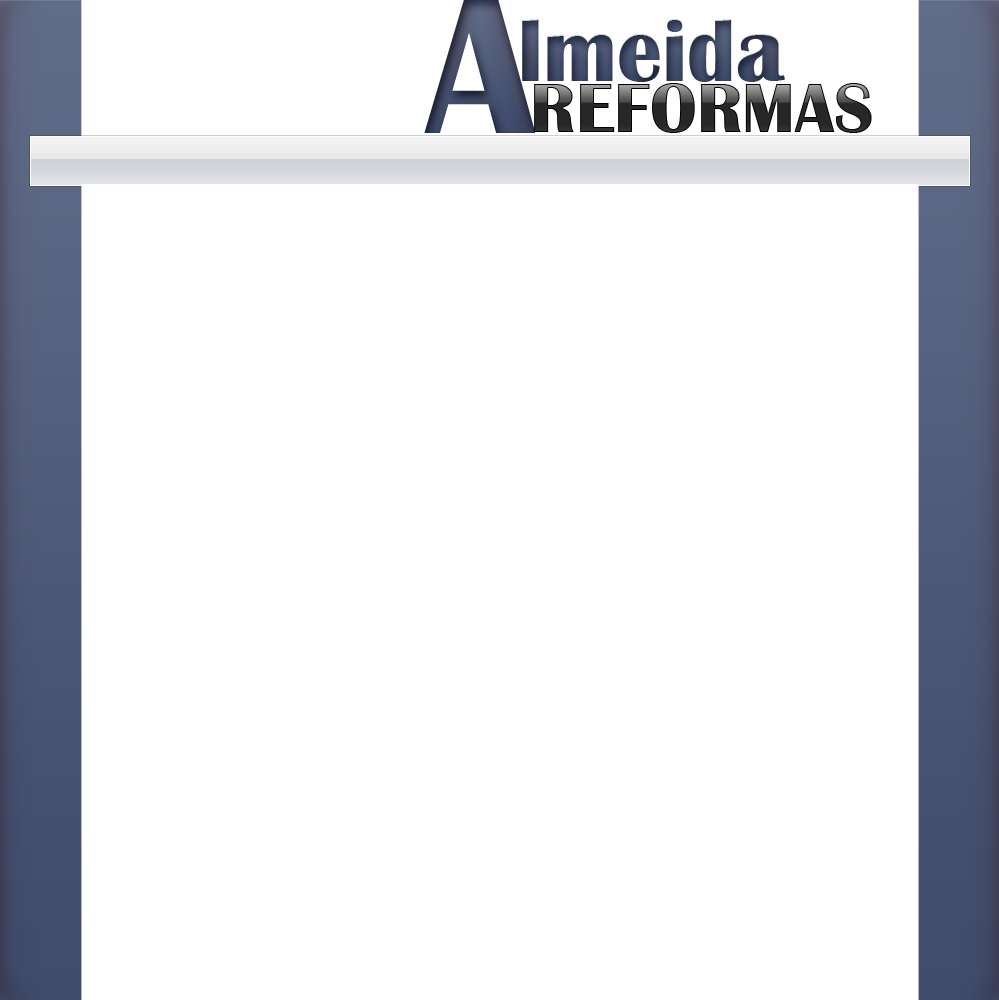
<style>
.page{position:relative;width:999px;height:1000px;background:#ffffff}
.page>*{position:absolute;margin:0}
.t1{font:200px "BritannicBold";color:#434c68}
.t2{font:90px "BritannicBold";color:#3c4661}
.t3{font:72px "BritannicBold"}
</style>
<div class="page">
<p class="t1" style="left:424px;top:0px;width:112px;height:133px">A</p>
<p class="t2" style="left:522px;top:20px;width:263px;height:62px">lmeida</p>
<p class="t3" style="left:534px;top:83px;width:338px;height:50px">REFORMAS</p>
</div>
